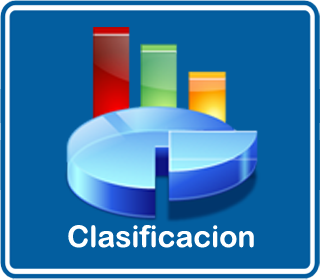
<style>
.page{position:relative;width:320px;height:280px;background:#035e9f}
.page>*{position:absolute;margin:0}
.t1{font:30px "ArialRoundedMTBold";color:#ffffff}
</style>
<div class="page">
<p class="t1" style="left:68px;top:225px;width:186px;height:23px">Clasificacion</p>
</div>
